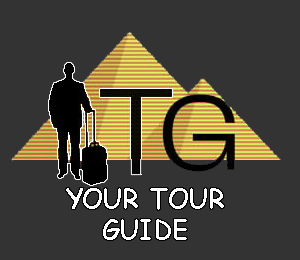
<style>
.page{position:relative;width:300px;height:260px;background:#333333}
.page>*{position:absolute;margin:0}
.t1{font:26px "ComicSansMS-Bold";color:#ffffff}
</style>
<div class="page">
<p class="t1" style="left:66px;top:188px;width:158px;height:52px;text-align:center">YOUR TOUR<br>GUIDE</p>
</div>
